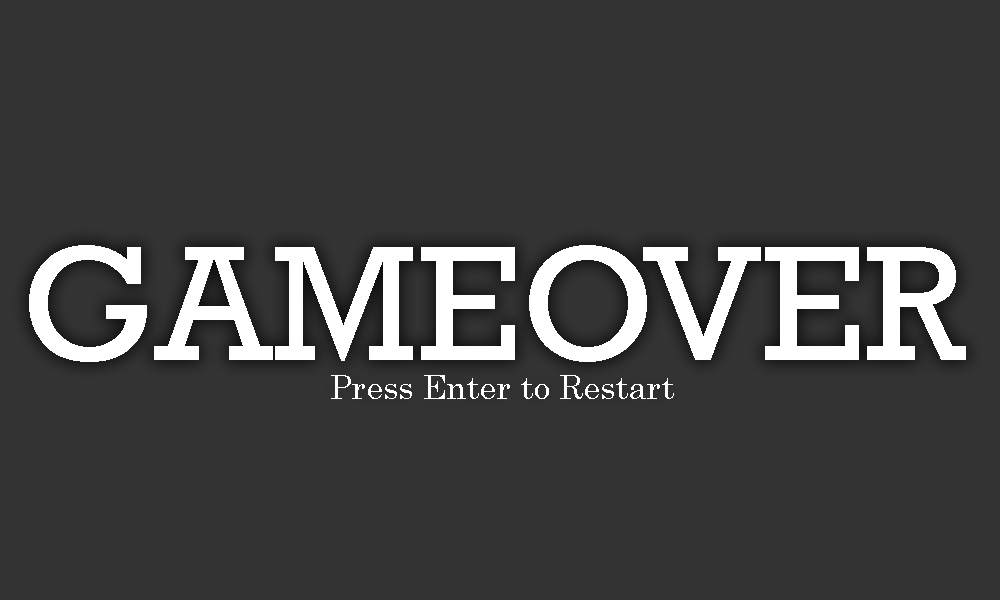
<style>
.page{position:relative;width:1000px;height:600px;background:#333333}
.page>*{position:absolute;margin:0}
.t1{font:166.7px "Rockwell";color:#ffffff}
.t2{font:33.3px "CenturySchoolbook";color:#ffffff}
</style>
<div class="page">
<p class="t1" style="left:29px;top:245px;width:937px;height:117px">GAMEOVER</p>
<p class="t2" style="left:331px;top:375px;width:343px;height:24px">Press Enter to Restart</p>
</div>
